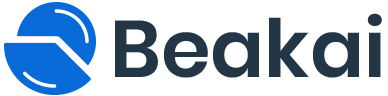
<style>
.page{position:relative;width:388px;height:96px;background:#ffffff}
.page>*{position:absolute;margin:0}
.t1{font:80px "Poppins-SemiBold";color:#223645}
</style>
<div class="page">
<p class="t1" style="left:115px;top:13px;width:267px;height:65px">Beakai</p>
</div>
